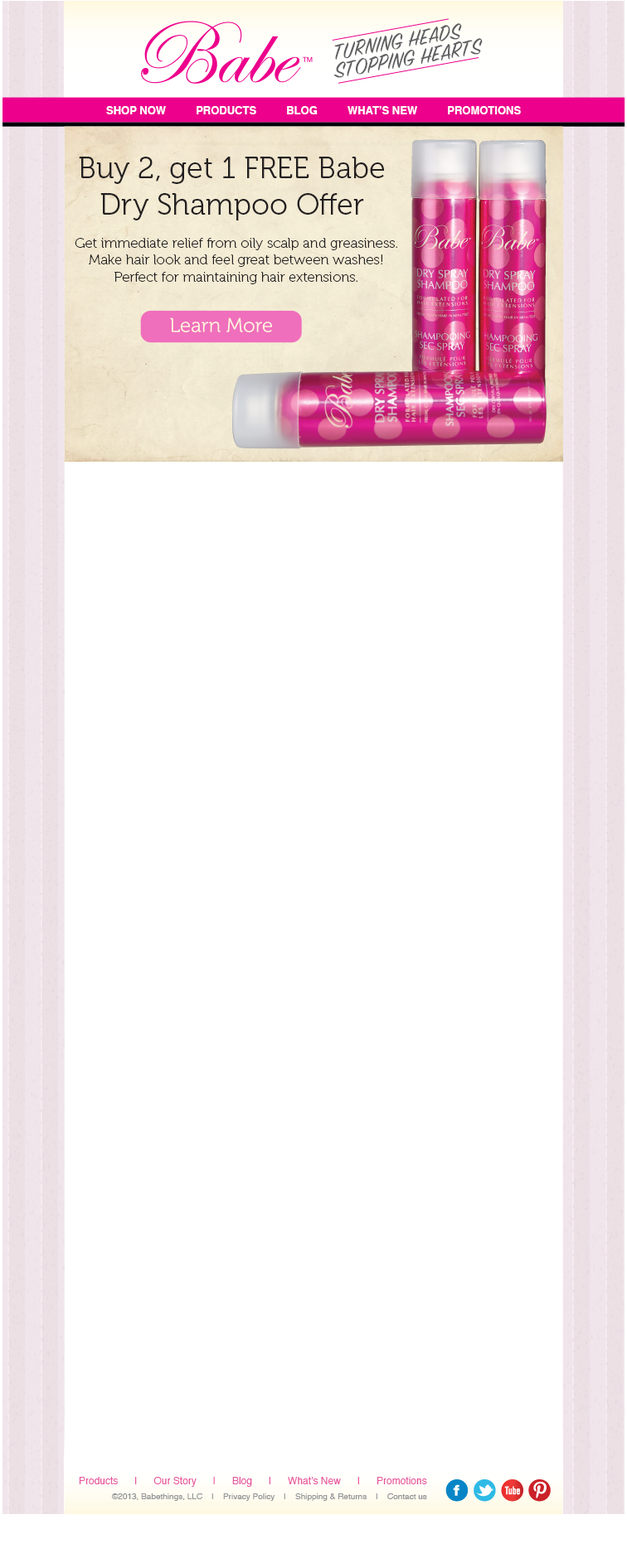
<style>
.page{position:relative;width:627px;height:1568px;background:#ffffff}
.page>*{position:absolute;margin:0}
.t1{font:24px "SignPainterHouseScript";color:#5f6062}
.t2{font:10.8px "Helvetica-Bold";color:#ffffff}
.t3{font:29.8px "Museo-300";color:#231f20}
.t4{font:14.1px "Museo-100";color:#231f20}
.t5{font:9.9px "Helvetica";color:#e9559e}
.t6{font:8.3px "Helvetica";color:#919396}
</style>
<div class="page">
<p class="t1" style="left:334px;top:23px;width:128px;height:37px">TURNING HEADS</p>
<p class="t1" style="left:333px;top:38px;width:149px;height:40px">STOPPING HEARTS</p>
<p class="t2" style="left:106px;top:106px;width:414px;height:8px">SHOP NOW          PRODUCTS          BLOG          WHAT’S NEW          PROMOTIONS</p>
<p class="t3" style="left:79px;top:157px;width:305px;height:63px;text-align:center">Buy 2, get 1 FREE Babe Dry Shampoo Offer</p>
<p class="t4" style="left:75px;top:238px;width:322px;height:46px;text-align:center">Get immediate relief from oily scalp and greasiness.<br>Make hair look and feel great between washes!<br>Perfect for maintaining hair extensions.</p>
<p class="t5" style="left:79px;top:1477px;width:348px;height:10px">Products      |      Our Story      |      Blog      |      What’s New      |      Promotions</p>
<p class="t6" style="left:112px;top:1493px;width:315px;height:8px">©2013, Babethings, LLC    |    Privacy Policy    |    Shipping &amp; Returns    |    Contact us</p>
</div>
